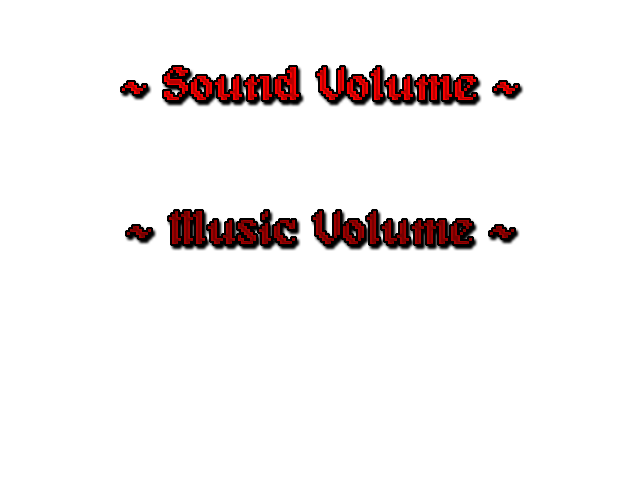
<style>
.page{position:relative;width:640px;height:480px;background:#ffffff}
.page>*{position:absolute;margin:0}
.t1{font:48px/72px "Alagard"}
</style>
<div class="page">
<p class="t1" style="left:122px;top:67px;width:396px;height:177px;text-align:center">~ Sound Volume ~<br><br>~ Music Volume ~</p>
</div>
